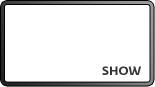
<style>
.page{position:relative;width:155px;height:87px;background:#ffffff}
.page>*{position:absolute;margin:0}
.t1{font:12px "FedraSans-BoldSC";color:#353535}
</style>
<div class="page">
<p class="t1" style="left:102px;top:66px;width:39px;height:9px">SHOW</p>
</div>
